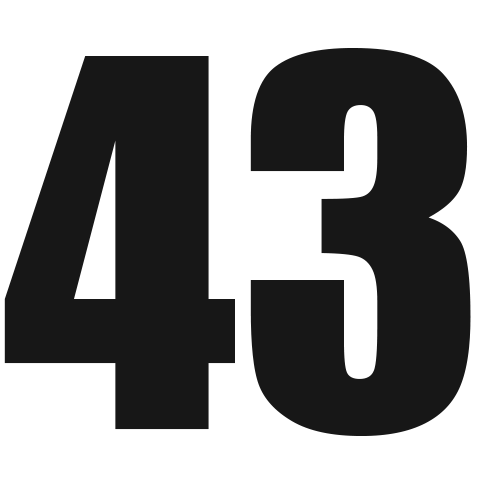
<style>
.page{position:relative;width:480px;height:480px;background:#171717}
.page>*{position:absolute;margin:0}
.t1{font:472.3px "Impact";color:#171717}
</style>
<div class="page">
<p class="t1" style="left:4px;top:48px;width:467px;height:388px">43</p>
</div>
